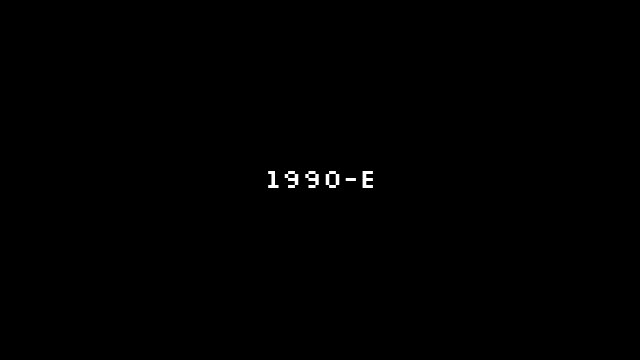
<style>
.page{position:relative;width:640px;height:360px;background:#000000}
.page>*{position:absolute;margin:0}
.t1{font:28.4px "Silkscreen[RusbyMr.Enot]";color:#ffffff}
</style>
<div class="page">
<p class="t1" style="left:268px;top:171px;width:105px;height:17px">1990-e</p>
</div>
